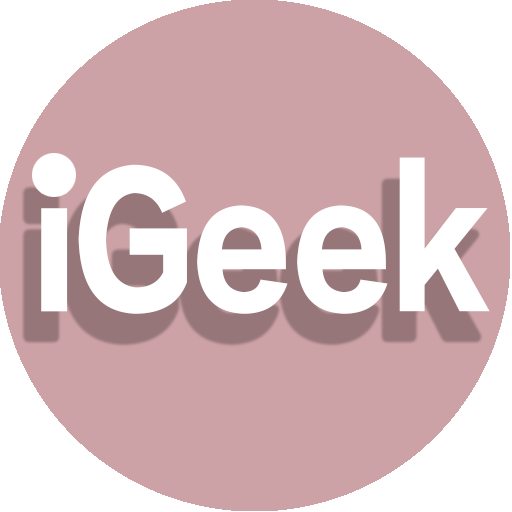
<style>
.page{position:relative;width:512px;height:512px;background:#cda2a6}
.page>*{position:absolute;margin:0}
.t1{font:167.7px "FZLTTHK--GBK1-0";color:#ffffff;scale:0.79 1}
</style>
<div class="page">
<p class="t1" style="left:41px;top:157px;width:449px;height:157px">iGeek</p>
</div>
